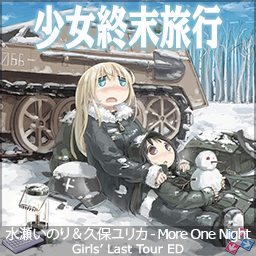
<style>
.page{position:relative;width:256px;height:256px}
.page>*{position:absolute;margin:0}
.t1{font:47.6px "PSP-NOW-MU-90pv-RKSJ-H";letter-spacing:-0.01em;color:#ffffff;scale:0.67 1}
.t2{font:14px "KozGoPr6N-Regular";letter-spacing:-0.05em;color:#ffffff}
.t3{font:14px "Verdana";letter-spacing:-0.1em;color:#ffffff}
.t4{font:12px "Verdana";letter-spacing:-0.005em;color:#ffffff}
</style>
<div class="page">
<p class="t1" style="left:34px;top:4px;width:189px;height:46px">少女終末旅行</p>
<p class="t2" style="left:5px;top:227px;width:246px;height:15px">水瀬いのり &amp; 久保ユリカ - <span class="t3">More One Night</span></p>
<p class="t4" style="left:72px;top:244px;width:112px;height:10px">Girls’ Last Tour ED</p>
</div>
